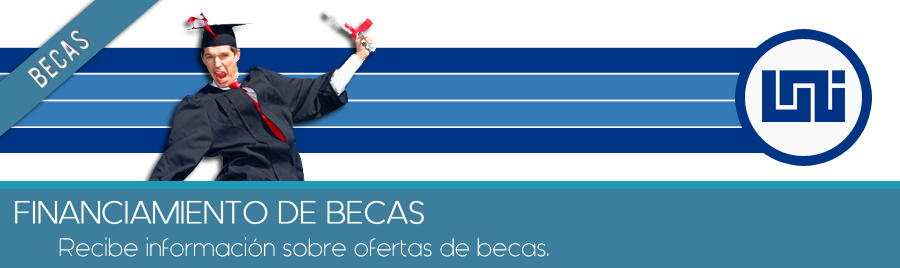
<style>
.page{position:relative;width:900px;height:268px;background:#3c7e9c}
.page>*{position:absolute;margin:0}
.t1{font:25px "Bebas";letter-spacing:0.025em}
.t2{font:31.2px "Generica";letter-spacing:0.025em;color:#ffffff;font-weight:bold}
.t3{font:25px "Generica";letter-spacing:0.025em;color:#ffffff}
</style>
<div class="page">
<p class="t1" style="left:27px;top:29px;width:63px;height:60px;rotate:-42deg">becas</p>
<p class="t2" style="left:15px;top:200px;width:409px;height:25px">FINANCIAMIENTO DE BECAS</p>
<p class="t3" style="left:59px;top:237px;width:490px;height:20px">Recibe información sobre ofertas de becas.</p>
</div>
